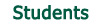
<style>
.page{position:relative;width:107px;height:25px;background:#ffffff}
.page>*{position:absolute;margin:0}
.t1{font:18px "Tahoma";letter-spacing:0.02em;color:#005941;font-weight:bold}
</style>
<div class="page">
<p class="t1" style="left:13px;top:5px;width:76px;height:15px">Students</p>
</div>
